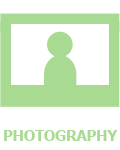
<style>
.page{position:relative;width:120px;height:150px;background:#ffffff}
.page>*{position:absolute;margin:0}
.t1{font:14.6px "Tahoma-Bold";color:#a9da92}
</style>
<div class="page">
<p class="t1" style="left:4px;top:130px;width:114px;height:11px">PHOTOGRAPHY</p>
</div>
